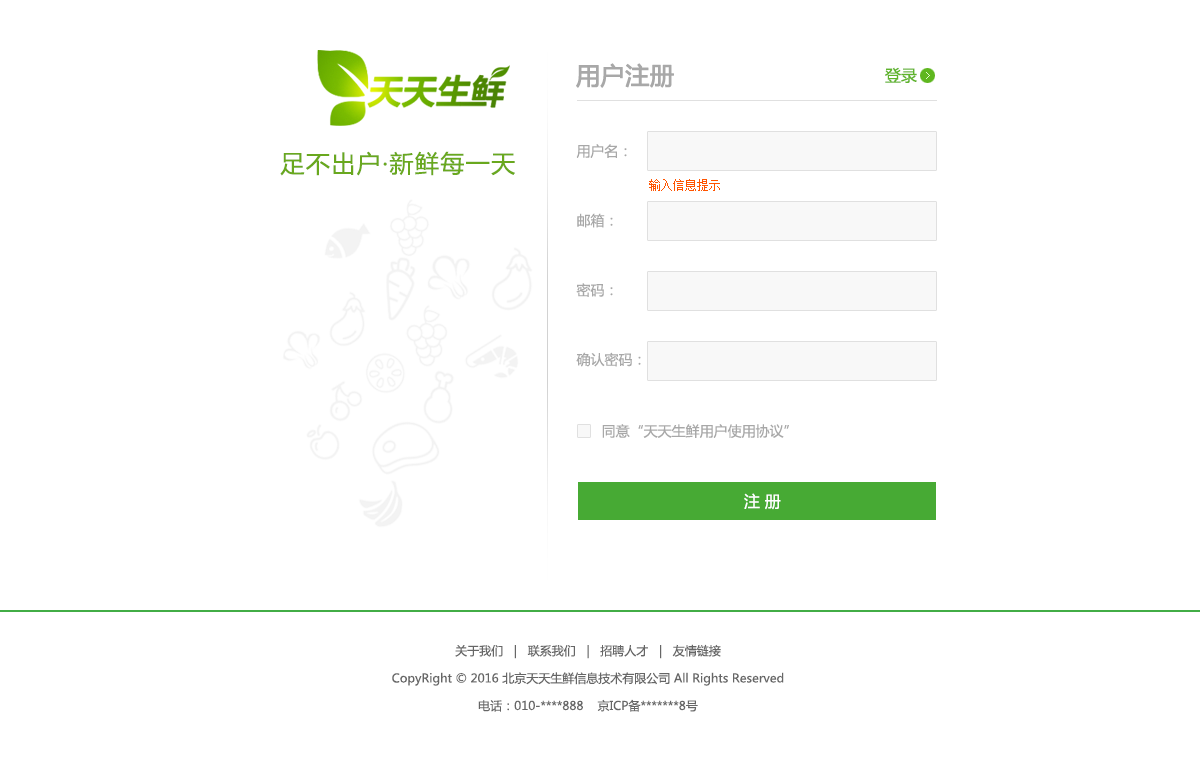
<style>
.page{position:relative;width:1200px;height:768px;background:#ffffff}
.page>*{position:absolute;margin:0}
.t1{font:24px "MicrosoftYaHei";color:#a8a8a8;font-weight:bold}
.t2{font:16px "MicrosoftYaHei";color:#5fb42a}
.t3{font:14px/69.5px "MicrosoftYaHei";color:#a8a8a8}
.t4{font:24px "MicrosoftYaHei";letter-spacing:0.06em;color:#69a81e}
.t5{font:12px "SimSun";color:#ff5400}
.t6{font:14px "MicrosoftYaHei";color:#a8a8a8}
.t7{font:16px "MicrosoftYaHei";color:#ffffff}
.t8{font:12px/27.5px "MicrosoftYaHei";color:#666666}
</style>
<div class="page">
<p class="t1" style="left:576px;top:63px;width:98px;height:25px">用户注册</p>
<p class="t2" style="left:885px;top:67px;width:32px;height:16px">登录</p>
<p class="t3" style="left:576px;top:144px;width:65px;height:223px">用户名：<br>邮箱：<br>密码：<br>确认密码：</p>
<p class="t4" style="left:280px;top:151px;width:235px;height:25px">足不出户·新鲜每一天</p>
<p class="t5" style="left:649px;top:179px;width:71px;height:12px">输入信息提示</p>
<p class="t6" style="left:602px;top:424px;width:187px;height:14px">同意“天天生鲜用户使用协议”</p>
<p class="t7" style="left:744px;top:493px;width:37px;height:17px">注 册</p>
<p class="t8" style="left:392px;top:644px;width:392px;height:68px;text-align:center">关于我们   |   联系我们   |   招聘人才   |   友情链接<br>CopyRight © 2016 北京天天生鲜信息技术有限公司 All Rights Reserved<br>电话：010-****888    京ICP备*******8号</p>
</div>
